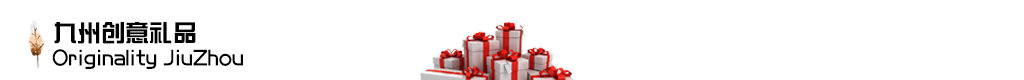
<style>
.page{position:relative;width:1024px;height:80px;background:#ffffff}
.page>*{position:absolute;margin:0}
.t1{font:24px "BDZYJT--GB1-0";color:#000000}
</style>
<div class="page">
<p class="t1" style="left:54px;top:22px;width:142px;height:22px">九州创意礼品</p>
<p class="t1" style="left:52px;top:49px;width:191px;height:20px">Originality JiuZhou</p>
</div>
